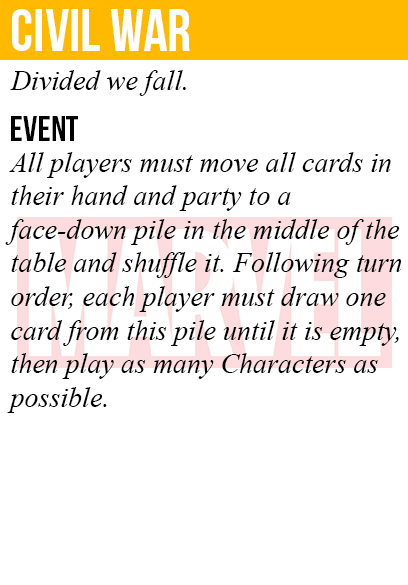
<style>
.page{position:relative;width:408px;height:585px;background:#ffffff}
.page>*{position:absolute;margin:0}
.t1{font:60px "BebasNeue";color:#ffffff}
.t2{font:28px "TimesNewRomanPS-ItalicMT";color:#000000}
.t3{font:36px "BebasNeue";color:#000000}
</style>
<div class="page">
<p class="t1" style="left:12px;top:9px;width:178px;height:42px">civil war</p>
<p class="t2" style="left:10px;top:70px;width:176px;height:26px">Divided we fall.</p>
<p class="t3" style="left:11px;top:116px;width:67px;height:25px">event</p>
<p class="t2" style="left:5px;top:152px;width:397px;height:261px">All players must move all cards in<br>their hand and party to a<br>face-down pile in the middle of the<br>table and shuffle it. Following turn<br>order, each player must draw one<br>card from this pile until it is empty,<br>then play as many Characters as<br>possible.</p>
</div>
